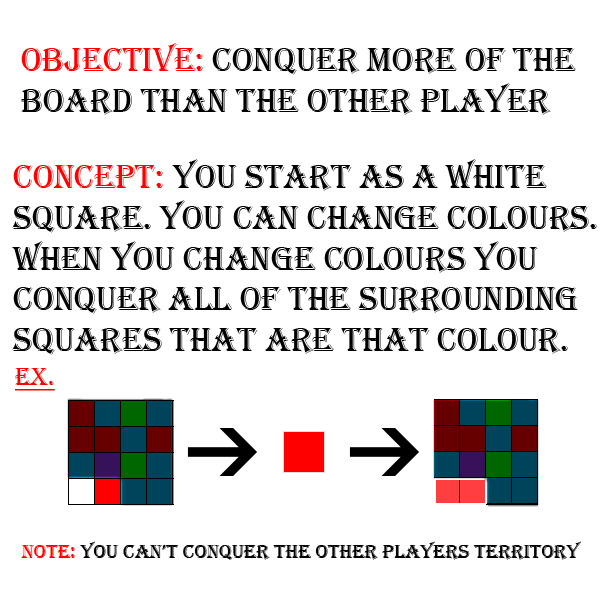
<style>
.page{position:relative;width:600px;height:600px;background:#ffffff}
.page>*{position:absolute;margin:0}
.t1{font:34px "Algerian";color:#000000}
.t2{font:34px "Algerian";color:#ff0000}
.t3{font:25px "Algerian";color:#ff0000;text-decoration:underline}
.t4{font:20px "Algerian";color:#000000}
.t5{font:20px "Algerian";color:#ff0000}
</style>
<div class="page">
<p class="t1" style="left:21px;top:42px;width:555px;height:73px"><span class="t2">Objective:</span> conquer more of the <br>board than the other player</p>
<p class="t1" style="left:12px;top:159px;width:585px;height:196px"><span class="t2">Concept: </span>You start as a white <br>square. you can change colours.<br>when you change colours you <br>conquer all of the surrounding<br>squares that are that colour.</p>
<p class="t3" style="left:15px;top:368px;width:40px;height:23px">EX.</p>
<p class="t4" style="left:21px;top:541px;width:560px;height:19px"><span class="t5">NOte:</span> You can’t conquer the other players territory</p>
</div>
